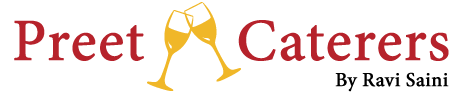
<style>
.page{position:relative;width:458px;height:97px;background:#ffffff}
.page>*{position:absolute;margin:0}
.t1{font:60px "MinionPro-Medium";color:#b6222b;font-weight:bold}
.t2{font:20px "MinionPro-Medium";color:#000000;font-weight:bold}
</style>
<div class="page">
<p class="t1" style="left:14px;top:20px;width:435px;height:41px">Preet      Caterers</p>
<p class="t2" style="left:335px;top:72px;width:114px;height:20px">By Ravi Saini</p>
</div>
